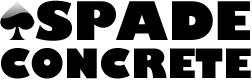
<style>
.page{position:relative;width:252px;height:80px;background:#000000}
.page>*{position:absolute;margin:0}
.t1{font:52px "GillSans-UltraBold";color:#000000}
.t2{font:39.7px "GillSans-UltraBold";color:#000000}
</style>
<div class="page">
<p class="t1" style="left:35px;top:0px;width:215px;height:41px">SPADE</p>
<p class="t2" style="left:1px;top:48px;width:250px;height:31px">CONCRETE</p>
</div>
